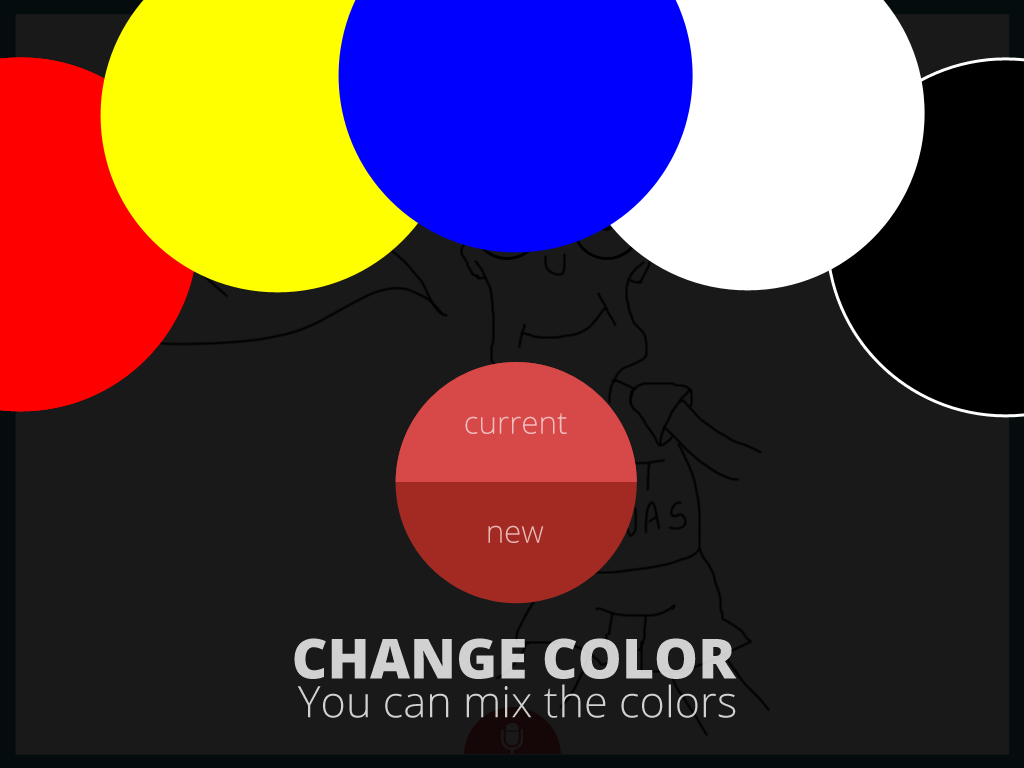
<style>
.page{position:relative;width:1024px;height:768px;background:#191919}
.page>*{position:absolute;margin:0}
.t1{font:31.3px "OpenSans-Light";color:#f1bebe}
.t2{font:31.3px "OpenSans-Light";color:#e6b8b6}
.t3{font:55.3px "OpenSans-Extrabold";color:#d1d1d1;text-transform:uppercase}
.t4{font:43.3px "OpenSans-Light";color:#d1d1d1}
</style>
<div class="page">
<p class="t1" style="left:465px;top:413px;width:102px;height:21px">current</p>
<p class="t2" style="left:488px;top:525px;width:56px;height:18px">new</p>
<p class="t3" style="left:294px;top:638px;width:443px;height:41px">change color</p>
<p class="t4" style="left:297px;top:684px;width:439px;height:34px">You can mix the colors</p>
</div>
